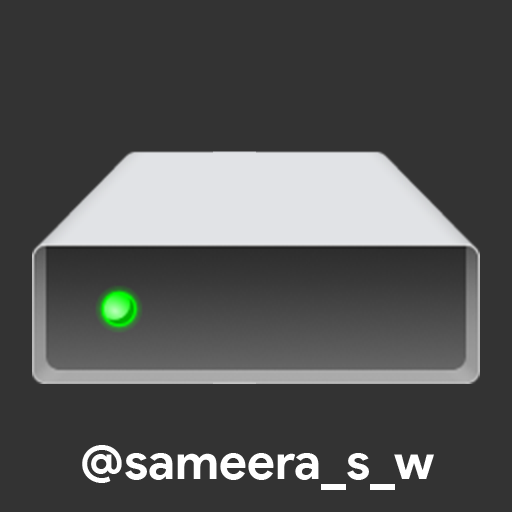
<style>
.page{position:relative;width:512px;height:512px;background:#333333}
.page>*{position:absolute;margin:0}
.t1{font:50px "ProductSans-Bold";color:#ffffff}
</style>
<div class="page">
<p class="t1" style="left:82px;top:445px;width:352px;height:45px">@sameera_s_w</p>
</div>
